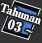
<style>
.page{position:relative;width:42px;height:43px;background:#333333}
.page>*{position:absolute;margin:0}
.t1{font:11px/14px "RyuminPro-ExBold";letter-spacing:-0.08em;color:#ffffff;font-weight:bold}
.t2{font:13px/14px "RyuminPro-ExBold";color:#ffffff;font-weight:bold}
.t3{font:13px/14px "WineArial";color:#ffffff;font-weight:bold}
</style>
<div class="page">
<p class="t1" style="left:0px;top:3px;width:41px;height:30px;text-align:center;rotate:19deg">Tahunan<br><span class="t2">  03 </span><span class="t3">~</span></p>
</div>
